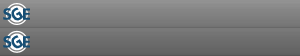
<style>
.page{position:relative;width:300px;height:56px}
.page>*{position:absolute;margin:0}
.t1{font:17.2px "Consolas-Bold";color:#174f75}
.t2{font:18.5px "Consolas-Bold";color:#174f75}
</style>
<div class="page">
<p class="t1" style="left:3px;top:8px;width:27px;height:12px">S E</p>
<p class="t2" style="left:11px;top:7px;width:13px;height:14px;rotate:-32deg">G</p>
<p class="t1" style="left:3px;top:36px;width:27px;height:12px">S E</p>
<p class="t2" style="left:11px;top:35px;width:13px;height:14px;rotate:-32deg">G</p>
</div>
